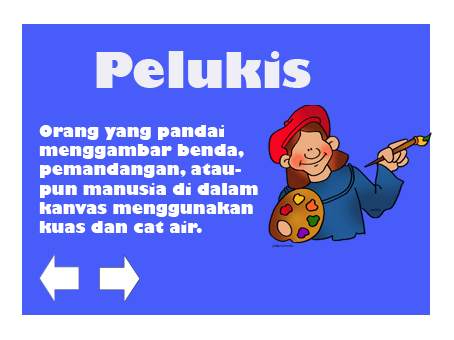
<style>
.page{position:relative;width:454px;height:340px;background:#475cf8}
.page>*{position:absolute;margin:0}
.t1{font:48px "GillSans-UltraBold";color:#f0eef5}
.t2{font:16px "GillSans-UltraBold";color:#ffffff}
</style>
<div class="page">
<p class="t1" style="left:96px;top:51px;width:215px;height:37px">Pelukis</p>
<p class="t2" style="left:39px;top:125px;width:219px;height:108px">Orang yang pandai <br>menggambar benda,<br>pemandangan, atau-<br>pun manusia di dalam<br>kanvas menggunakan <br>kuas dan cat air.</p>
</div>
